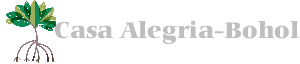
<style>
.page{position:relative;width:300px;height:64px;background:#ffffff}
.page>*{position:absolute;margin:0}
.t1{font:24px "CarminaBT-Black";color:#bfbfbf}
</style>
<div class="page">
<p class="t1" style="left:55px;top:20px;width:244px;height:24px">Casa Alegria-Bohol</p>
</div>
